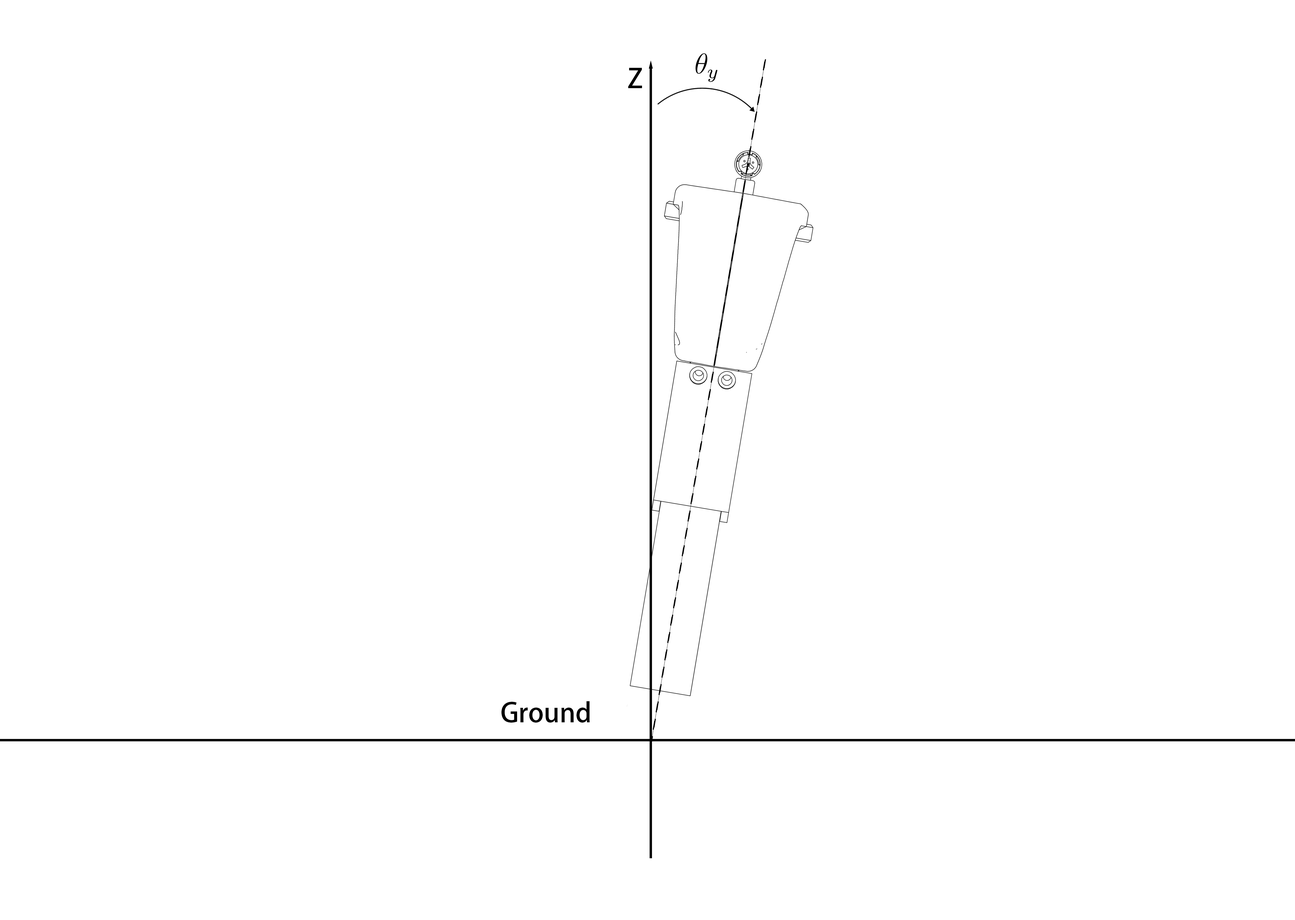
<style>
.page{position:relative;width:1295px;height:920px;background:#ffffff}
.page>*{position:absolute;margin:0}
.t1{font:26.4px "AdobeFanHeitiStd-Bold";color:#000000}
</style>
<div class="page">
<p class="t1" style="left:628px;top:68px;width:14px;height:20px">Z</p>
<p class="t1" style="left:501px;top:702px;width:89px;height:21px">Ground</p>
</div>
